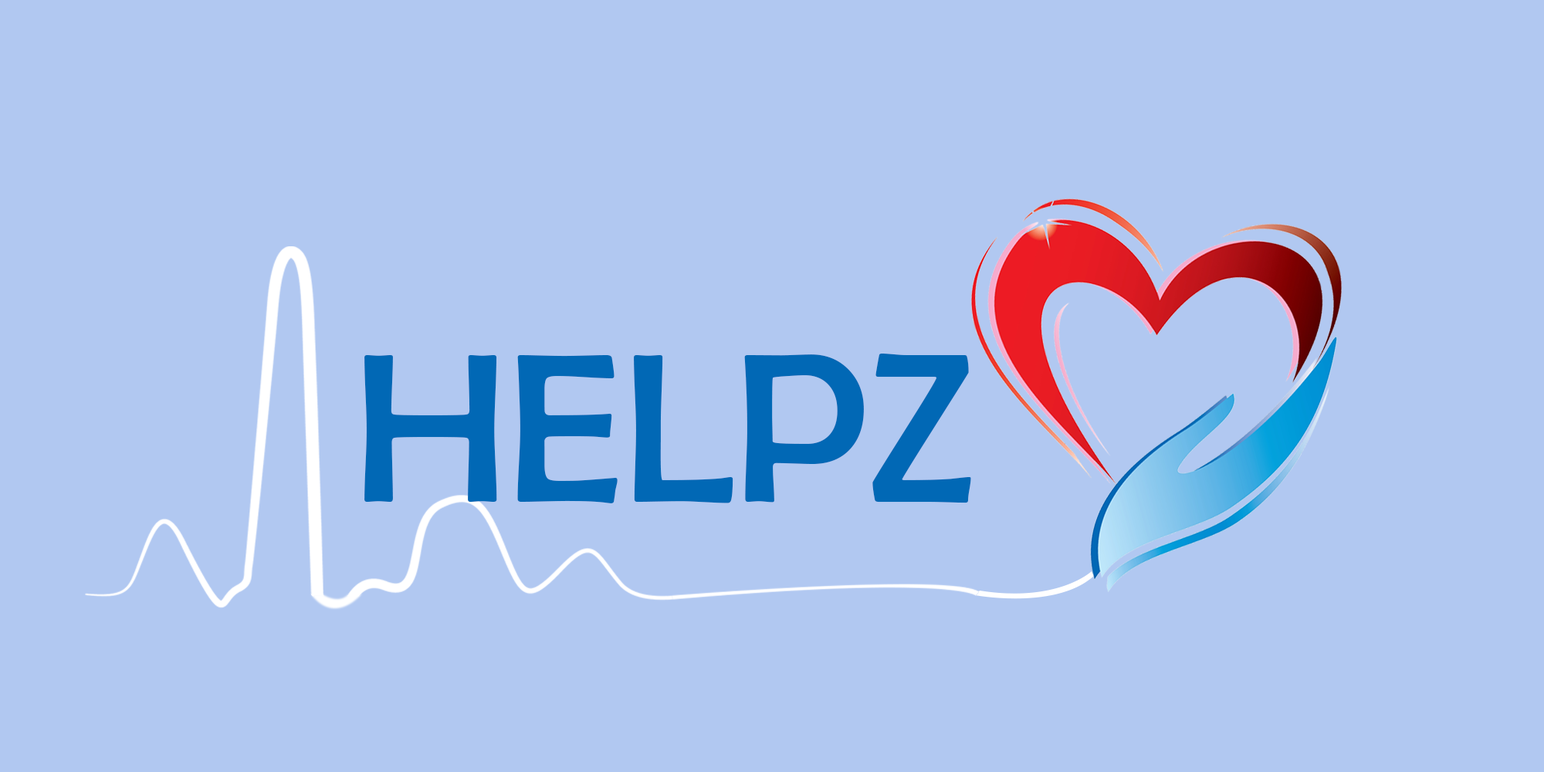
<style>
.page{position:relative;width:1544px;height:772px;background:#b1c8f1}
.page>*{position:absolute;margin:0}
.t1{font:214.9px "BerlinSansFB-Reg";color:#0168b5}
</style>
<div class="page">
<p class="t1" style="left:364px;top:354px;width:607px;height:149px">HELPZ</p>
</div>
